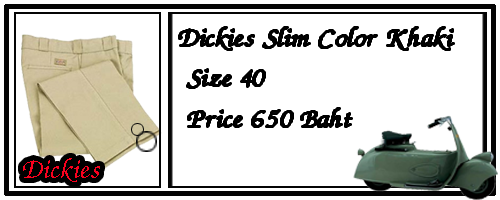
<style>
.page{position:relative;width:500px;height:200px;background:#ffffff}
.page>*{position:absolute;margin:0}
.t1{font:33.8px "DSUMonTaNa";color:#060606;scale:1.06 1}
.t2{font:36px "DSUMonTaNa";color:#f9011e}
</style>
<div class="page">
<p class="t1" style="left:179px;top:27px;width:275px;height:100px">Dickies Slim Color Khaki<br> Size 40<br> Price 650 Baht</p>
<p class="t2" style="left:23px;top:158px;width:77px;height:24px">Dickies</p>
</div>
